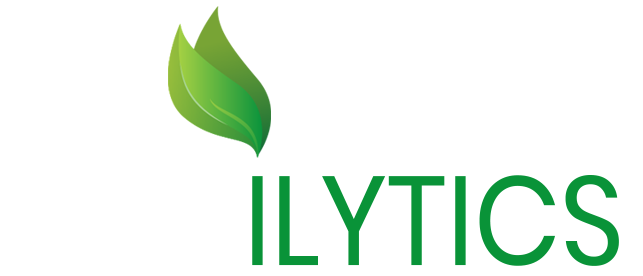
<style>
.page{position:relative;width:643px;height:276px;background:#ffffff}
.page>*{position:absolute;margin:0}
.t1{font:126px "Poppins-Regular";color:#099338;text-transform:uppercase;scale:0.9 1}
.t2{font:126px "Poppins-Regular";color:#ffffff;text-transform:uppercase;scale:0.9 1}
</style>
<div class="page">
<p class="t1" style="left:17px;top:175px;width:602px;height:91px"><span class="t2">AGR</span>ILYTICS</p>
</div>
